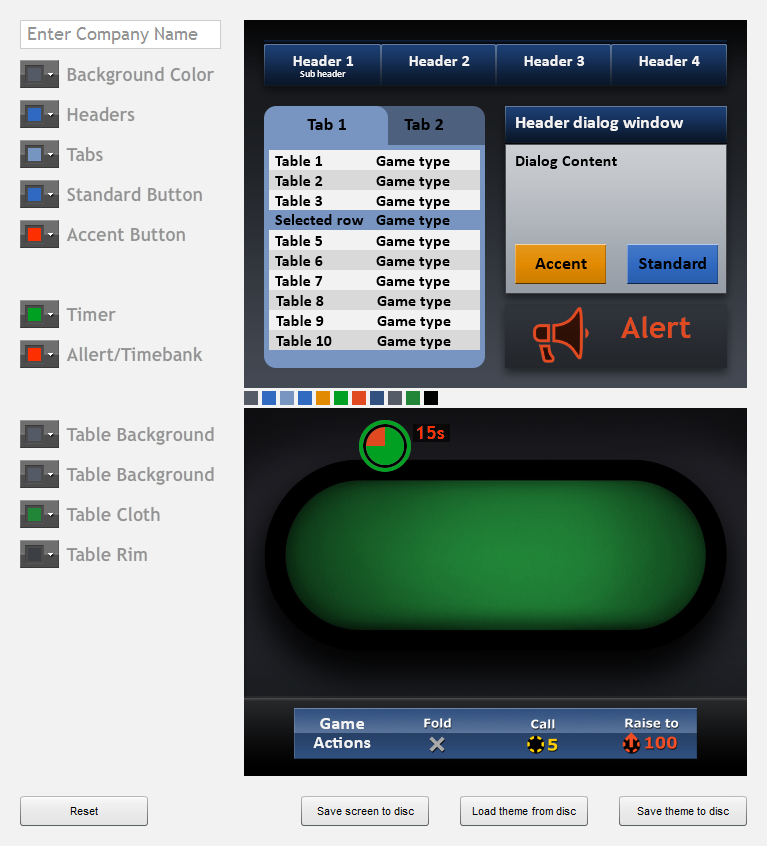
<style>
.page{position:relative;width:767px;height:846px;background:#f2f2f2}
.page>*{position:absolute;margin:0}
.t1{font:16px "Calibri-Bold";color:#f2f2f2}
.t2{font:10px "Calibri-Bold";color:#f2f2f2}
.t3{font:18px "Calibri-Bold";color:#000000}
.t4{font:18px "Calibri-Bold";color:#f2f2f2}
.t5{font:16px "Calibri-Bold";color:#000000}
.t6{font:30px "TrebuchetMS-Bold";color:#e14a21}
.t7{font:18px "TrebuchetMS-Bold";color:#fc3001}
</style>
<div class="page">
<p class="t1" style="left:293px;top:55px;width:61px;height:11px">Header 1</p>
<p class="t1" style="left:409px;top:55px;width:61px;height:11px">Header 2</p>
<p class="t1" style="left:524px;top:55px;width:61px;height:11px">Header 3</p>
<p class="t1" style="left:639px;top:55px;width:61px;height:11px">Header 4</p>
<p class="t2" style="left:300px;top:70px;width:46px;height:7px">Sub header</p>
<p class="t3" style="left:307px;top:118px;width:39px;height:12px">Tab 1</p>
<p class="t3" style="left:404px;top:118px;width:40px;height:12px">Tab 2</p>
<p class="t4" style="left:516px;top:116px;width:168px;height:15px">Header dialog window</p>
<p class="t5" style="left:275px;top:155px;width:48px;height:11px">Table 1</p>
<p class="t5" style="left:376px;top:156px;width:74px;height:13px">Game type</p>
<p class="t5" style="left:516px;top:155px;width:101px;height:14px">Dialog Content</p>
<p class="t5" style="left:275px;top:175px;width:48px;height:11px">Table 2</p>
<p class="t5" style="left:376px;top:176px;width:74px;height:13px">Game type</p>
<p class="t5" style="left:275px;top:195px;width:48px;height:11px">Table 3</p>
<p class="t5" style="left:376px;top:196px;width:74px;height:13px">Game type</p>
<p class="t5" style="left:275px;top:214px;width:89px;height:11px">Selected row</p>
<p class="t5" style="left:376px;top:215px;width:74px;height:13px">Game type</p>
<p class="t5" style="left:275px;top:235px;width:47px;height:11px">Table 5</p>
<p class="t5" style="left:376px;top:236px;width:74px;height:13px">Game type</p>
<p class="t5" style="left:275px;top:255px;width:48px;height:11px">Table 6</p>
<p class="t5" style="left:376px;top:256px;width:74px;height:13px">Game type</p>
<p class="t3" style="left:639px;top:257px;width:67px;height:12px">Standard</p>
<p class="t3" style="left:535px;top:258px;width:52px;height:11px">Accent</p>
<p class="t5" style="left:275px;top:275px;width:48px;height:11px">Table 7</p>
<p class="t5" style="left:376px;top:276px;width:74px;height:13px">Game type</p>
<p class="t5" style="left:276px;top:295px;width:48px;height:11px">Table 8</p>
<p class="t5" style="left:377px;top:296px;width:74px;height:13px">Game type</p>
<p class="t5" style="left:276px;top:315px;width:48px;height:11px">Table 9</p>
<p class="t5" style="left:377px;top:316px;width:74px;height:13px">Game type</p>
<p class="t6" style="left:621px;top:316px;width:70px;height:22px">Alert</p>
<p class="t6" style="left:621px;top:316px;width:70px;height:22px">Alert</p>
<p class="t5" style="left:276px;top:335px;width:56px;height:11px">Table 10</p>
<p class="t5" style="left:377px;top:336px;width:74px;height:13px">Game type</p>
<p class="t7" style="left:417px;top:426px;width:28px;height:13px">15s</p>
<p class="t7" style="left:417px;top:426px;width:28px;height:13px">15s</p>
<p class="t4" style="left:320px;top:718px;width:44px;height:11px">Game</p>
<p class="t4" style="left:313px;top:737px;width:58px;height:11px">Actions</p>
</div>
